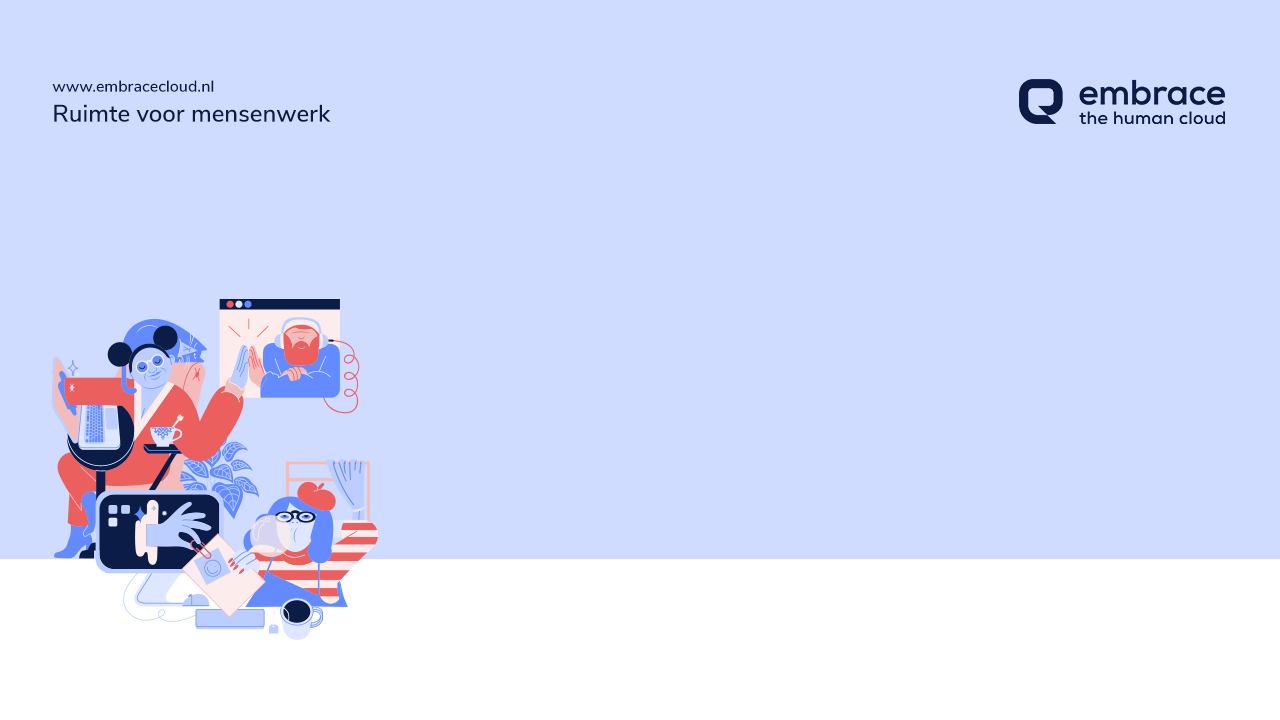
<style>
.page{position:relative;width:1280px;height:720px;background:#cfdcff}
.page>*{position:absolute;margin:0}
.t1{font:24px/30px "NunitoSans-SemiBold";color:#0c1c47}
.t2{font:16px/30px "NunitoSans-SemiBold";color:#0c1c47}
</style>
<div class="page">
<p class="t1" style="left:52px;top:80px;width:279px;height:42px"><span class="t2">www.embracecloud.nl<br></span>Ruimte voor mensenwerk</p>
</div>
